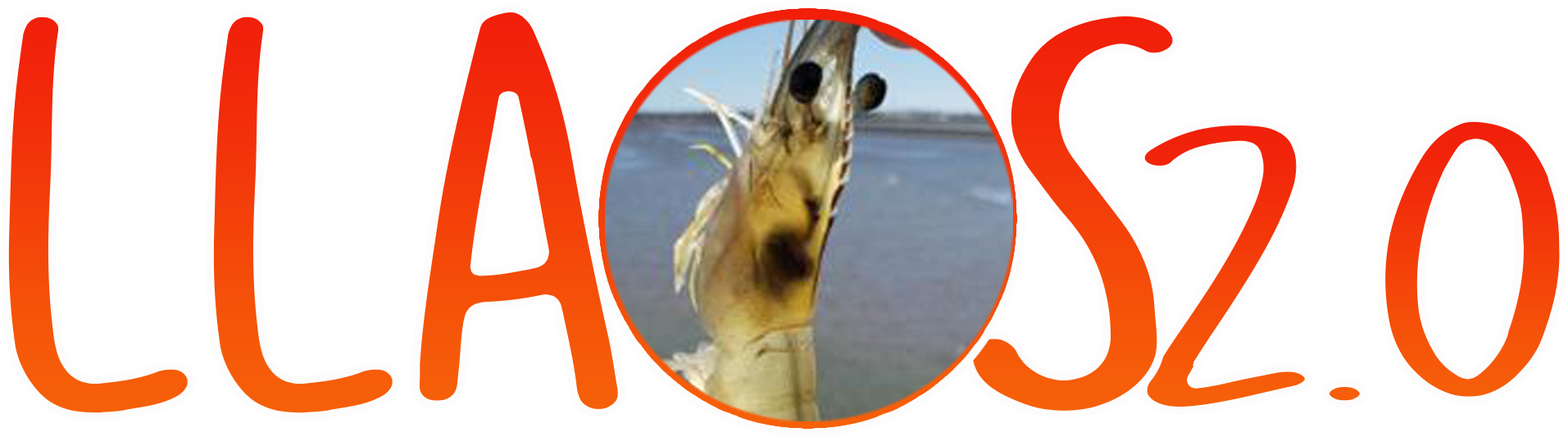
<style>
.page{position:relative;width:1568px;height:437px;background:#ffffff}
.page>*{position:absolute;margin:0}
.t1{font:604.7px "SKETCHYRegular";scale:1.22 1}
.t2{font:627.1px "SKETCHYRegular";scale:1.35 1}
.t3{font:435.8px "SKETCHYRegular";scale:1.57 1}
</style>
<div class="page">
<p class="t1" style="left:0px;top:4px;width:626px;height:417px">LLA</p>
<p class="t2" style="left:964px;top:7px;width:217px;height:412px">S</p>
<p class="t3" style="left:1136px;top:113px;width:432px;height:302px">2.0</p>
</div>
